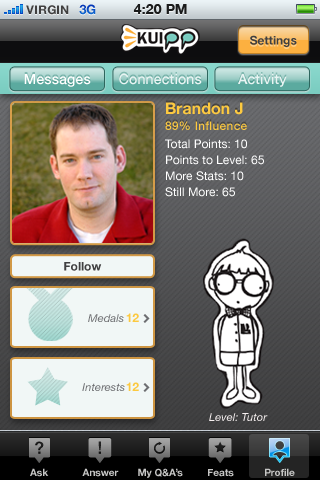
<style>
.page{position:relative;width:320px;height:480px}
.page>*{position:absolute;margin:0}
.t1{font:12px "HelveticaNeue-Bold";color:#404040;text-transform:uppercase}
.t2{font:13px "HelveticaNeue-Bold";color:#0c54c5;text-transform:uppercase}
.t3{font:14px "HelveticaNeue-Bold";color:#1a1b1b;text-transform:uppercase}
.t4{font:12px "HelveticaNeue-Bold";color:#404041}
.t5{font:14px "HelveticaNeue-Medium";letter-spacing:0.01em;color:#ffffff}
.t6{font:14px "HelveticaNeue-Medium";letter-spacing:0.01em;color:#e9f4f3}
.t7{font:12px/16px "HelveticaNeue-Medium";letter-spacing:0.02em;color:#fcc940}
.t8{font:16px/18px "HelveticaNeue-Bold";color:#fcc940}
.t9{font:12px/16px "HelveticaNeue";color:#ffffff}
.t10{font:11px "HelveticaNeue-Italic";letter-spacing:0.01em;color:#6d6e71}
.t11{font:12px "HelveticaNeue-Bold";color:#fcc940}
.t12{font:11px "HelveticaNeue-Italic";letter-spacing:0.01em;color:#f6f0f0}
.t13{font:10px "HelveticaNeue-Bold";color:#c6c6c5}
</style>
<div class="page">
<p class="t1" style="left:26px;top:5px;width:43px;height:10px">VIRGIN</p>
<p class="t2" style="left:79px;top:4px;width:17px;height:11px">3G</p>
<p class="t3" style="left:133px;top:4px;width:54px;height:10px">4:20 PM</p>
<p class="t4" style="left:250px;top:35px;width:47px;height:12px">Settings</p>
<p class="t5" style="left:24px;top:74px;width:67px;height:13px">Messages</p>
<p class="t6" style="left:119px;top:73px;width:83px;height:12px">Connections</p>
<p class="t6" style="left:238px;top:74px;width:49px;height:13px">Activity</p>
<p class="t7" style="left:165px;top:102px;width:82px;height:29px"><span class="t8">Brandon J<br></span>89% Influence</p>
<p class="t9" style="left:165px;top:139px;width:99px;height:58px">Total Points: 10<br>Points to Level: 65<br>More Stats: 10<br>Still More: 65</p>
<p class="t4" style="left:64px;top:262px;width:38px;height:9px">Follow</p>
<p class="t10" style="left:88px;top:314px;width:36px;height:8px">Medals</p>
<p class="t11" style="left:126px;top:313px;width:13px;height:9px">12</p>
<p class="t10" style="left:82px;top:383px;width:43px;height:8px">Interests</p>
<p class="t11" style="left:126px;top:382px;width:13px;height:9px">12</p>
<p class="t12" style="left:209px;top:413px;width:59px;height:8px">Level: Tutor</p>
<p class="t13" style="left:30px;top:468px;width:19px;height:9px">Ask</p>
<p class="t13" style="left:82px;top:468px;width:37px;height:9px">Answer</p>
<p class="t13" style="left:138px;top:468px;width:45px;height:10px">My Q&amp;A’s</p>
<p class="t13" style="left:208px;top:469px;width:26px;height:8px">Feats</p>
<p class="t13" style="left:265px;top:468px;width:30px;height:8px">Profile</p>
</div>
